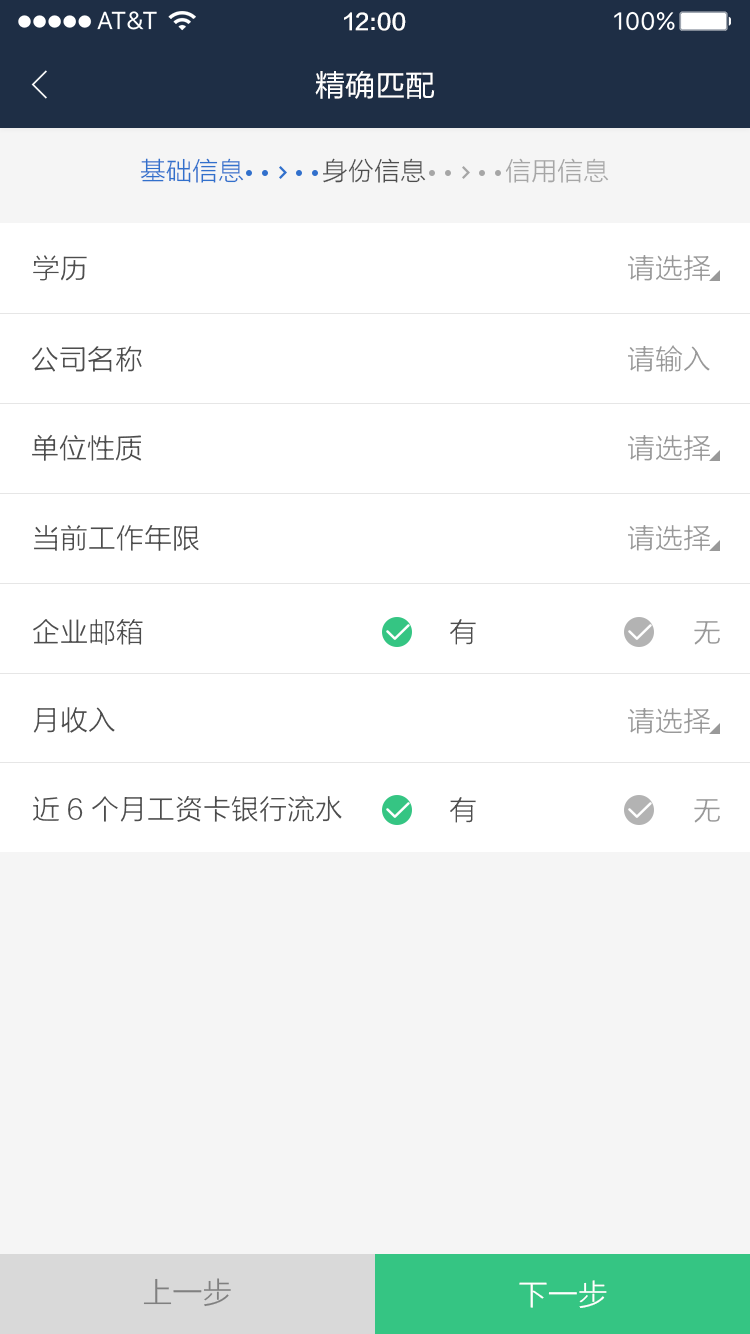
<style>
.page{position:relative;width:750px;height:1334px;background:#ffffff}
.page>*{position:absolute;margin:0}
.t1{font:22px "FZLTZHK--GBK1-0";color:#ffffff}
.t2{font:30px "FZLTHJW--GB1-0";color:#ffffff}
.t3{font:26px "FZLTXHK";color:#3170cc}
.t4{font:26px "FZLTXHK";color:#4d4d4d}
.t5{font:26px "FZLTXHK";color:#a6a6a6}
.t6{font:28px "FZLTXHK";color:#4d4d4d}
.t7{font:28px "FZLTXHK";color:#999999}
.t8{font:30px "FZLTXHK";color:#808080}
.t9{font:30px "FZLTXHK";color:#ffffff}
</style>
<div class="page">
<p class="t1" style="left:344px;top:12px;width:62px;height:19px">12:00</p>
<p class="t2" style="left:315px;top:71px;width:120px;height:28px">精确匹配</p>
<p class="t3" style="left:140px;top:158px;width:104px;height:25px">基础信息</p>
<p class="t4" style="left:323px;top:158px;width:103px;height:25px">身份信息</p>
<p class="t5" style="left:505px;top:158px;width:104px;height:25px">信用信息</p>
<p class="t6" style="left:33px;top:255px;width:54px;height:26px">学历</p>
<p class="t7" style="left:628px;top:255px;width:82px;height:26px">请选择</p>
<p class="t6" style="left:32px;top:346px;width:110px;height:26px">公司名称</p>
<p class="t7" style="left:628px;top:345px;width:82px;height:27px">请输入</p>
<p class="t6" style="left:32px;top:434px;width:110px;height:27px">单位性质</p>
<p class="t7" style="left:628px;top:435px;width:82px;height:26px">请选择</p>
<p class="t6" style="left:34px;top:525px;width:165px;height:26px">当前工作年限</p>
<p class="t7" style="left:628px;top:525px;width:82px;height:26px">请选择</p>
<p class="t6" style="left:33px;top:619px;width:110px;height:26px">企业邮箱</p>
<p class="t6" style="left:450px;top:619px;width:26px;height:26px">有</p>
<p class="t7" style="left:694px;top:621px;width:26px;height:24px">无</p>
<p class="t6" style="left:33px;top:707px;width:82px;height:26px">月收入</p>
<p class="t7" style="left:628px;top:708px;width:82px;height:26px">请选择</p>
<p class="t6" style="left:33px;top:795px;width:309px;height:27px">近6个月工资卡银行流水</p>
<p class="t6" style="left:450px;top:797px;width:26px;height:26px">有</p>
<p class="t7" style="left:694px;top:799px;width:26px;height:24px">无</p>
<p class="t8" style="left:143px;top:1278px;width:88px;height:29px">上一步</p>
<p class="t9" style="left:519px;top:1280px;width:88px;height:28px">下一步</p>
</div>
